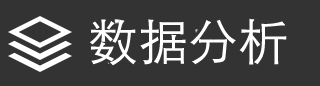
<style>
.page{position:relative;width:320px;height:86px;background:#333333}
.page>*{position:absolute;margin:0}
.t1{font:50px "STHeitiSC-Light";color:#ffffff}
</style>
<div class="page">
<p class="t1" style="left:90px;top:18px;width:197px;height:48px">数据分析</p>
</div>
